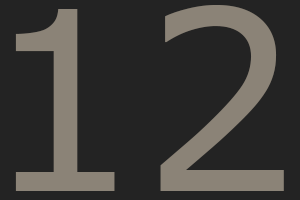
<style>
.page{position:relative;width:300px;height:200px;background:#232323}
.page>*{position:absolute;margin:0}
.t1{font:250px "Verdana";color:#8b8377}
</style>
<div class="page">
<p class="t1" style="left:15px;top:5px;width:269px;height:186px">12</p>
</div>
